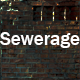
<style>
.page{position:relative;width:80px;height:80px}
.page>*{position:absolute;margin:0}
.t1{font:19px "FranklinGothic-Medium";color:#ffffff}
</style>
<div class="page">
<p class="t1" style="left:0px;top:32px;width:80px;height:16px">Sewerage</p>
</div>
